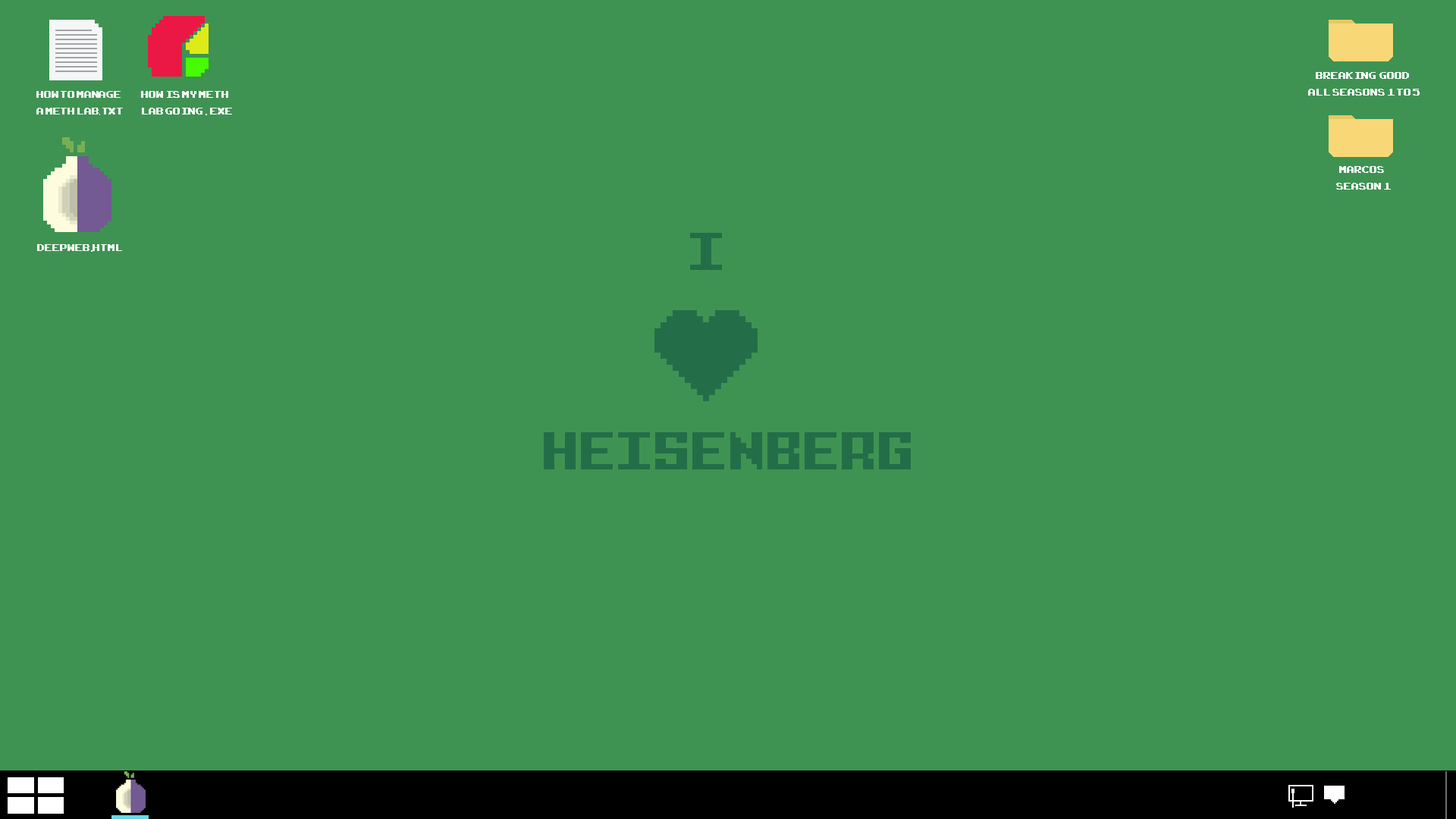
<style>
.page{position:relative;width:1456px;height:819px;background:#3e9352}
.page>*{position:absolute;margin:0}
.t1{font:13.6px "ArcadeClassic";color:#ffffff}
.t2{font:13.6px "ArcadeClassic";color:#f5f6f7}
.t3{font:13.6px "AgencyFB-Reg";color:#f5f6f7}
.t4{font:13.6px "MyriadPro-Regular";color:#ffffff}
.t5{font:54.6px "PixelIntv";color:#236e48}
.t6{font:13.6px "MyriadPro-Regular";color:#f5f6f7}
</style>
<div class="page">
<p class="t1" style="left:1308px;top:72px;width:112px;height:24px">BREAKING  GOOD<br>ALL SEASONS 1 to 5</p>
<p class="t2" style="left:36px;top:91px;width:87px;height:24px">How To Manage<br>a Meth Lab<span class="t3">.</span>txt</p>
<p class="t1" style="left:141px;top:91px;width:91px;height:24px">HOW IS MY METH<br>LAB GOING <span class="t4">. </span>exe</p>
<p class="t1" style="left:1336px;top:166px;width:55px;height:24px">mARCOS<br>SEASON 1</p>
<p class="t5" style="left:690px;top:233px;width:32px;height:37px">I</p>
<p class="t2" style="left:37px;top:244px;width:85px;height:8px">deepweb<span class="t6">.</span>html</p>
<p class="t5" style="left:544px;top:432px;width:367px;height:37px">HEISENBERG</p>
</div>
